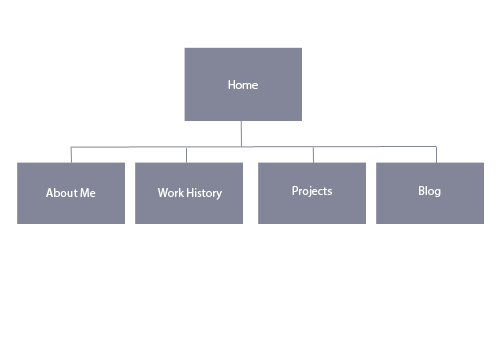
<style>
.page{position:relative;width:504px;height:360px;background:#ffffff}
.page>*{position:absolute;margin:0}
.t1{font:12px "MyriadPro-Regular";color:#ffffff}
</style>
<div class="page">
<p class="t1" style="left:228px;top:80px;width:30px;height:9px">Home</p>
<p class="t1" style="left:46px;top:188px;width:50px;height:9px">About Me</p>
<p class="t1" style="left:157px;top:188px;width:65px;height:12px">Work History</p>
<p class="t1" style="left:292px;top:186px;width:40px;height:11px">Projects</p>
<p class="t1" style="left:419px;top:186px;width:22px;height:11px">Blog</p>
</div>
